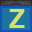
<style>
.page{position:relative;width:32px;height:32px;background:#1d759e}
.page>*{position:absolute;margin:0}
.t1{font:25.6px "Helvetica-Bold";color:#d4e168}
</style>
<div class="page">
<p class="t1" style="left:9px;top:9px;width:16px;height:19px">Z</p>
</div>
